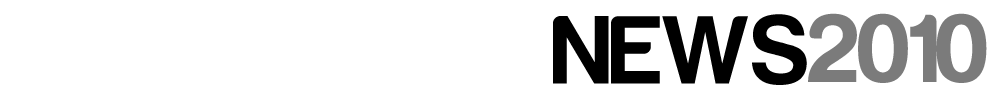
<style>
.page{position:relative;width:1000px;height:100px;background:#ffffff}
.page>*{position:absolute;margin:0}
.t1{font:100px "Harabara-Bold";color:#000000}
.t2{font:100px "Harabara-Bold";color:#7b7b7b}
</style>
<div class="page">
<p class="t1" style="left:553px;top:14px;width:254px;height:71px">NEWS</p>
<p class="t2" style="left:808px;top:13px;width:179px;height:70px">2010</p>
</div>
